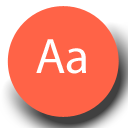
<style>
.page{position:relative;width:128px;height:128px;background:#ff6347}
.page>*{position:absolute;margin:0}
.t1{font:50px "MyriadPro-Regular";color:#ffffff}
</style>
<div class="page">
<p class="t1" style="left:36px;top:39px;width:50px;height:35px">Aa</p>
</div>
